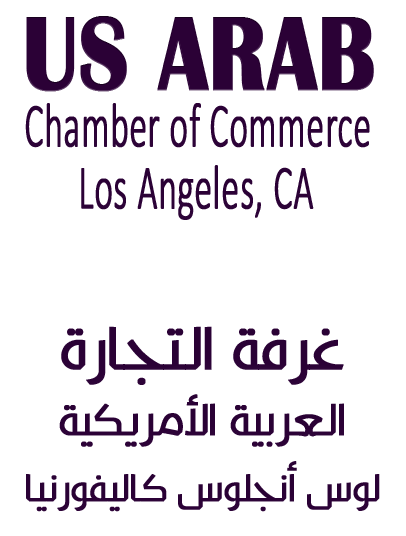
<style>
.page{position:relative;width:406px;height:536px;background:#ffffff}
.page>*{position:absolute;margin:0}
.t1{font:108px "BritannicBold";color:#2b0136;font-weight:bold;scale:0.82 1}
.t2{font:63px "Calibri-Light";color:#2b0136;font-weight:bold;scale:0.56 1}
.t3{font:37px/66px "KufyanArabic-Regular";color:#2b0136;font-weight:bold}
.t4{font:58px/66px "KufyanArabic-Regular";color:#2b0136;font-weight:bold}
.t5{font:43px/66px "KufyanArabic-Regular";color:#2b0136;font-weight:bold}
</style>
<div class="page">
<p class="t1" style="left:26px;top:16px;width:348px;height:76px">US ARAB</p>
<p class="t2" style="left:25px;top:103px;width:345px;height:45px">Chamber of Commerce</p>
<p class="t2" style="left:81px;top:165px;width:233px;height:55px">Los Angeles, CA</p>
<p class="t3" style="left:26px;top:326px;width:354px;height:186px;text-align:center"><span class="t4">غرفة التجارة<br></span><span class="t5">العربية الأمريكية<br></span>لوس أنجلوس كاليفورنيا</p>
</div>
